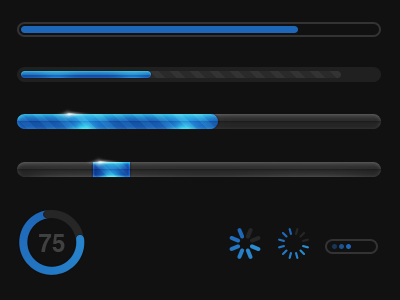
<style>
.page{position:relative;width:400px;height:300px;background:#111111}
.page>*{position:absolute;margin:0}
.t1{font:24px "Helvetica-Bold";color:#404040;text-transform:uppercase}
</style>
<div class="page">
<p class="t1" style="left:39px;top:234px;width:26px;height:18px">75</p>
</div>
